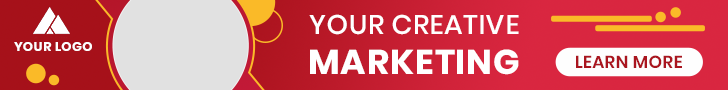
<style>
.page{position:relative;width:728px;height:90px}
.page>*{position:absolute;margin:0}
.t1{font:27px "Poppins-Medium";letter-spacing:0.025em;color:#ffffff}
.t2{font:12.6px "Poppins-Bold";letter-spacing:0.025em;color:#fefefe}
.t3{font:34.4px "Poppins-Bold";letter-spacing:0.025em;color:#ffffff}
.t4{font:17.4px "Poppins-SemiBold";letter-spacing:0.025em;color:#aa151f}
</style>
<div class="page">
<p class="t1" style="left:309px;top:14px;width:210px;height:21px">YOUR CREATIVE</p>
<p class="t2" style="left:14px;top:42px;width:78px;height:9px">YOUR LOGO</p>
<p class="t3" style="left:310px;top:49px;width:209px;height:26px">MARKETING</p>
<p class="t4" style="left:576px;top:55px;width:106px;height:13px">LEARN MORE</p>
</div>
